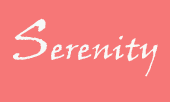
<style>
.page{position:relative;width:170px;height:102px;background:#f67777}
.page>*{position:absolute;margin:0}
.t1{font:30.7px "VinerHandITC";color:#faf8f6;scale:1.05 1}
.t2{font:54.5px "VinerHandITC";color:#f6f9f8;scale:1.05 1}
.t3{font:30.7px "VinerHandITC";color:#f6f9f8;scale:1.05 1}
</style>
<div class="page">
<p class="t1" style="left:13px;top:18px;width:145px;height:59px"><span class="t2">S</span><span class="t3">ere</span>nity</p>
</div>
